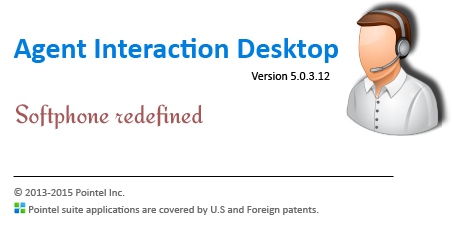
<style>
.page{position:relative;width:452px;height:233px;background:#ffffff}
.page>*{position:absolute;margin:0}
.t1{font:30px "Calibri-Bold";color:#007edf}
.t2{font:12px "Calibri";color:#030303}
.t3{font:26px "Redressed";color:#a65858}
.t4{font:11px "Calibri";color:#6b6969}
</style>
<div class="page">
<p class="t1" style="left:13px;top:38px;width:325px;height:25px">Agent Interaction Desktop</p>
<p class="t2" style="left:251px;top:72px;width:79px;height:8px">Version 5.0.3.12</p>
<p class="t3" style="left:16px;top:104px;width:187px;height:26px">Softphone redefined</p>
<p class="t4" style="left:14px;top:188px;width:111px;height:8px">© 2013-2015 Pointel Inc.</p>
<p class="t4" style="left:29px;top:206px;width:290px;height:9px">Pointel suite applications are covered by U.S and Foreign patents.</p>
</div>
